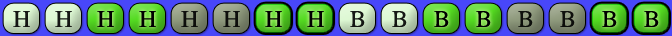
<style>
.page{position:relative;width:672px;height:36px}
.page>*{position:absolute;margin:0}
.t1{font:24px "OpusChords";color:#000000}
</style>
<div class="page">
<p class="t1" style="left:13px;top:11px;width:17px;height:16px;opacity:0.9">H</p>
<p class="t1" style="left:55px;top:11px;width:17px;height:16px;opacity:0.9">H</p>
<p class="t1" style="left:97px;top:11px;width:17px;height:16px">H</p>
<p class="t1" style="left:139px;top:11px;width:17px;height:16px">H</p>
<p class="t1" style="left:181px;top:11px;width:17px;height:16px;opacity:0.9">H</p>
<p class="t1" style="left:223px;top:11px;width:17px;height:16px;opacity:0.9">H</p>
<p class="t1" style="left:265px;top:11px;width:17px;height:16px">H</p>
<p class="t1" style="left:307px;top:11px;width:17px;height:16px">H</p>
<p class="t1" style="left:350px;top:11px;width:15px;height:16px;opacity:0.9">B</p>
<p class="t1" style="left:392px;top:11px;width:15px;height:16px;opacity:0.9">B</p>
<p class="t1" style="left:434px;top:11px;width:15px;height:16px">B</p>
<p class="t1" style="left:476px;top:11px;width:15px;height:16px">B</p>
<p class="t1" style="left:518px;top:11px;width:15px;height:16px;opacity:0.9">B</p>
<p class="t1" style="left:560px;top:11px;width:15px;height:16px;opacity:0.9">B</p>
<p class="t1" style="left:602px;top:11px;width:15px;height:16px">B</p>
<p class="t1" style="left:644px;top:11px;width:15px;height:16px">B</p>
</div>
